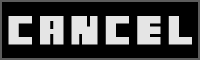
<style>
.page{position:relative;width:200px;height:60px;background:#000000}
.page>*{position:absolute;margin:0}
.t1{font:42px "Blocked";color:#010101}
</style>
<div class="page">
<p class="t1" style="left:5px;top:13px;width:190px;height:35px">cancel</p>
</div>
